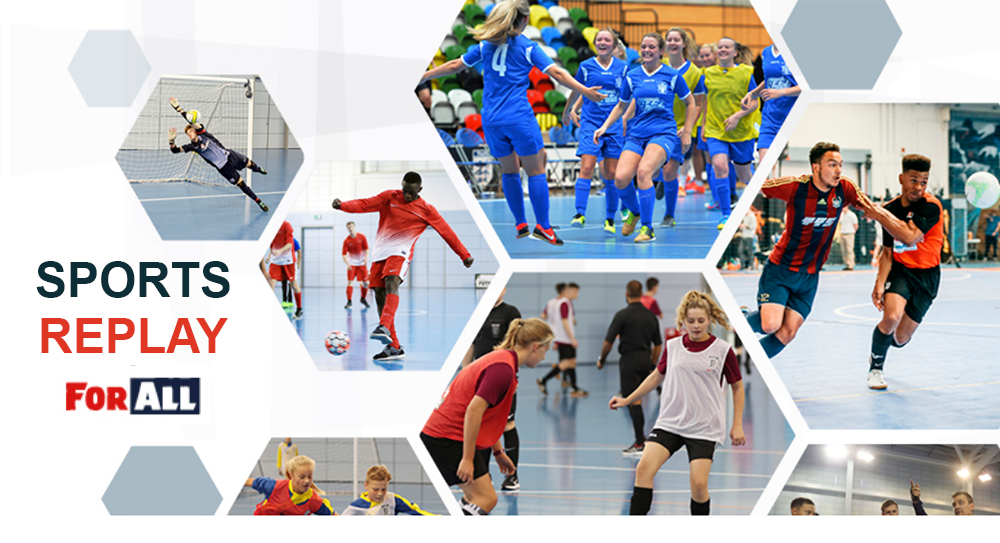
<style>
.page{position:relative;width:1000px;height:543px}
.page>*{position:absolute;margin:0}
.t1{font:48px "Arial-BoldMT";color:#0d2e37}
.t2{font:48px "Arial-BoldMT";color:#e03724}
</style>
<div class="page">
<p class="t1" style="left:36px;top:261px;width:194px;height:37px">SPORTS</p>
<p class="t2" style="left:41px;top:318px;width:187px;height:35px">REPLAY</p>
</div>
